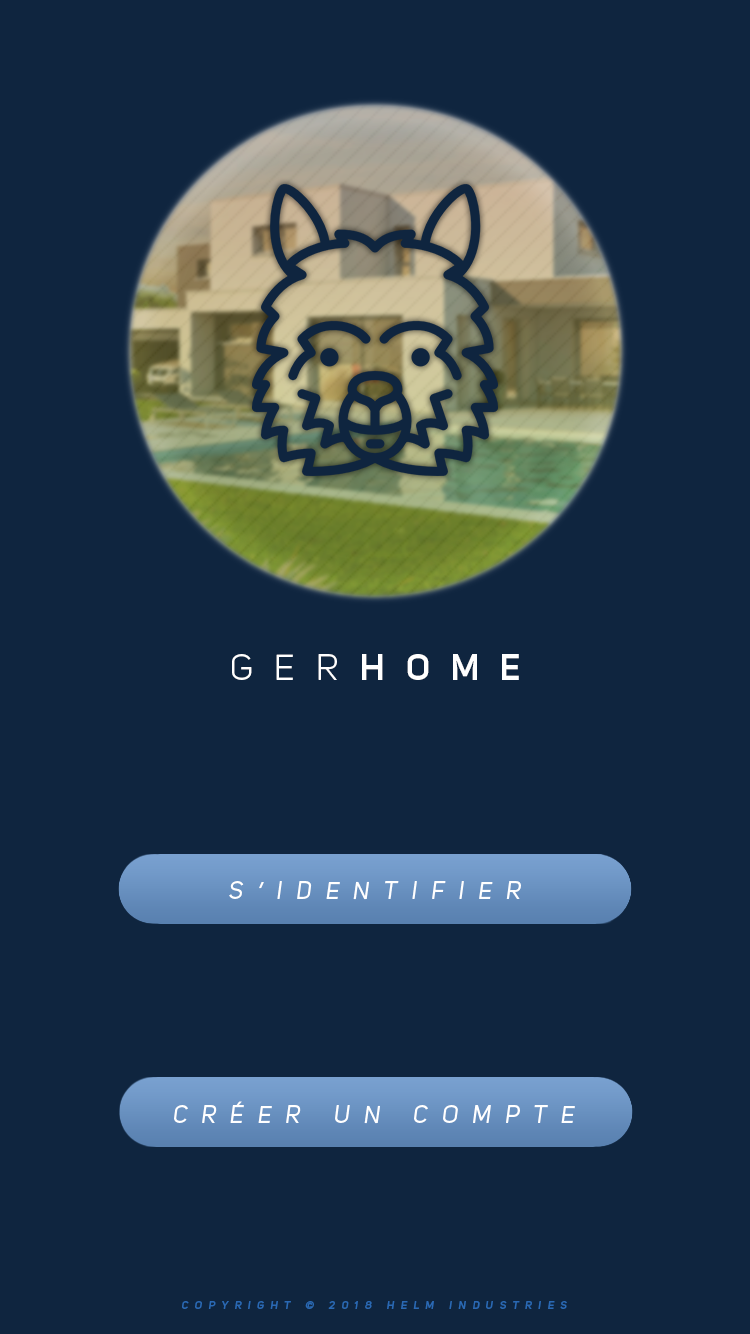
<style>
.page{position:relative;width:750px;height:1334px;background:#0f253f}
.page>*{position:absolute;margin:0}
.t1{font:36px "UniSansBook";letter-spacing:0.585em;color:#ffffff;text-transform:uppercase}
.t2{font:36px "UniSansSemiBold";letter-spacing:0.585em;color:#ffffff;text-transform:uppercase}
.t3{font:24px "UniSansRegularItalic";letter-spacing:0.585em;color:#ffffff;text-transform:uppercase}
.t4{font:11px "UniSansSemiBoldItalic";letter-spacing:0.585em;color:#2a69b4;text-transform:uppercase}
</style>
<div class="page">
<p class="t1" style="left:232px;top:654px;width:105px;height:26px">Ger</p>
<p class="t2" style="left:362px;top:654px;width:157px;height:26px">HOME</p>
<p class="t3" style="left:229px;top:881px;width:292px;height:19px">S’identifier</p>
<p class="t3" style="left:174px;top:1101px;width:401px;height:23px">Créer un compte</p>
<p class="t4" style="left:182px;top:1301px;width:385px;height:8px">Copyright © 2018 helm industries</p>
</div>
